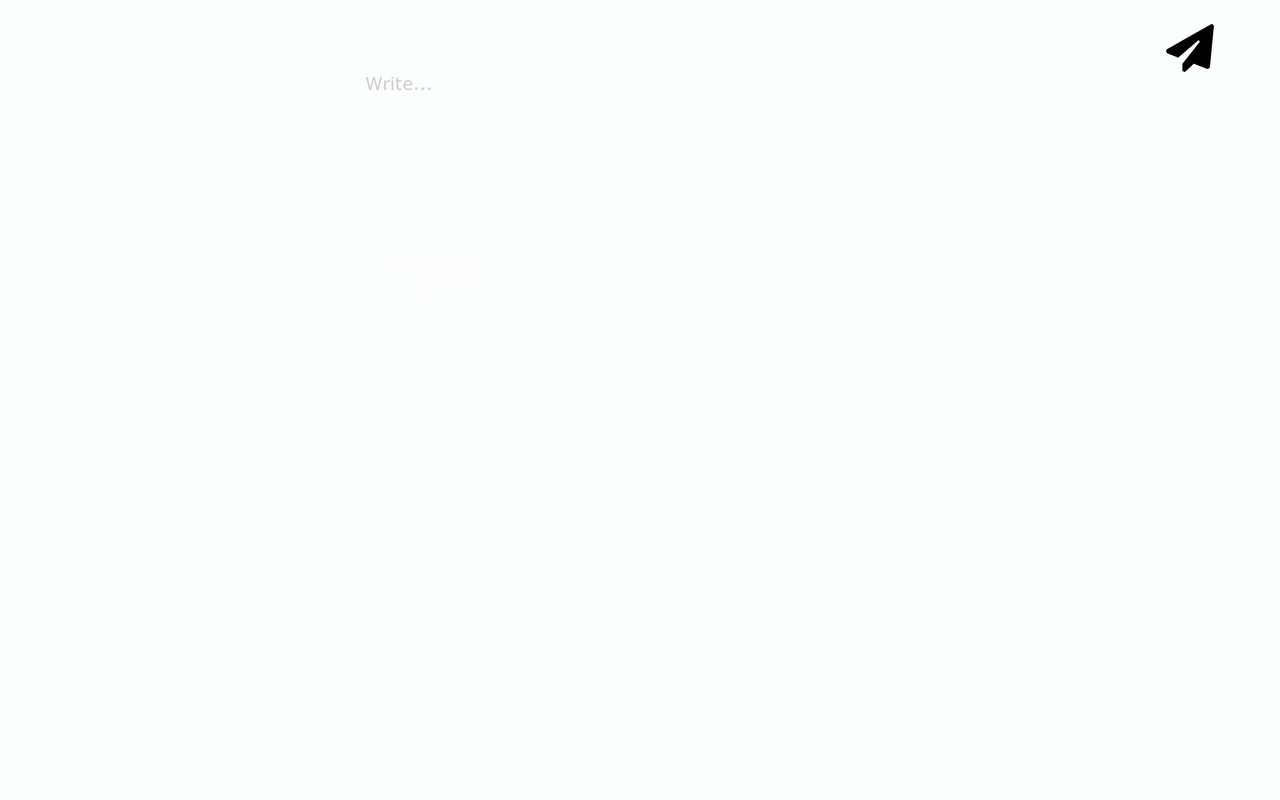
<style>
.page{position:relative;width:1280px;height:800px;background:#fcffff}
.page>*{position:absolute;margin:0}
.t1{font:18px "Verdana";color:#cbcbcb}
</style>
<div class="page">
<p class="t1" style="left:365px;top:76px;width:66px;height:15px">Write...</p>
</div>
